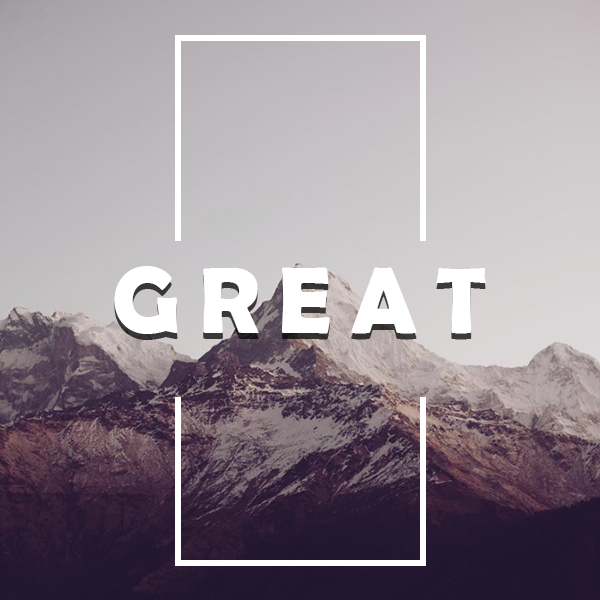
<style>
.page{position:relative;width:600px;height:600px}
.page>*{position:absolute;margin:0}
.t1{font:95px "BerlinSansFBDemi-Bold";letter-spacing:0.2em;color:#ffffff}
</style>
<div class="page">
<p class="t1" style="left:114px;top:266px;width:372px;height:68px">GREAT</p>
</div>
